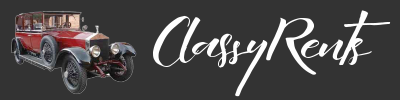
<style>
.page{position:relative;width:400px;height:100px;background:#333333}
.page>*{position:absolute;margin:0}
.t1{font:100px "KingSize-Script";letter-spacing:-0.025em;color:#fefefe;scale:1.2 1}
</style>
<div class="page">
<p class="t1" style="left:153px;top:10px;width:238px;height:87px">ClassyRents</p>
</div>
